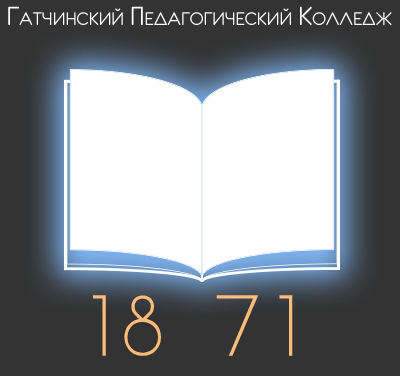
<style>
.page{position:relative;width:400px;height:376px;background:#333333}
.page>*{position:absolute;margin:0}
.t1{font:29px "Eurofurenceregular";color:#ffffff;font-variant:small-caps}
.t2{font:72px "Steiner";letter-spacing:0.2em;color:#ffbc7b;font-variant:small-caps}
.t3{font:72px "Steiner";letter-spacing:0.72em;color:#ffbc7b;font-variant:small-caps}
.t4{font:72px "Steiner";letter-spacing:0.24em;color:#ffbc7b;font-variant:small-caps}
.t5{font:72px "Steiner";color:#ffbc7b;font-variant:small-caps}
</style>
<div class="page">
<p class="t1" style="left:8px;top:6px;width:384px;height:19px">Гатчинский Педагогический Колледж</p>
<p class="t2" style="left:93px;top:295px;width:200px;height:61px">1<span class="t3">8</span><span class="t4">7</span><span class="t5">1</span></p>
</div>
